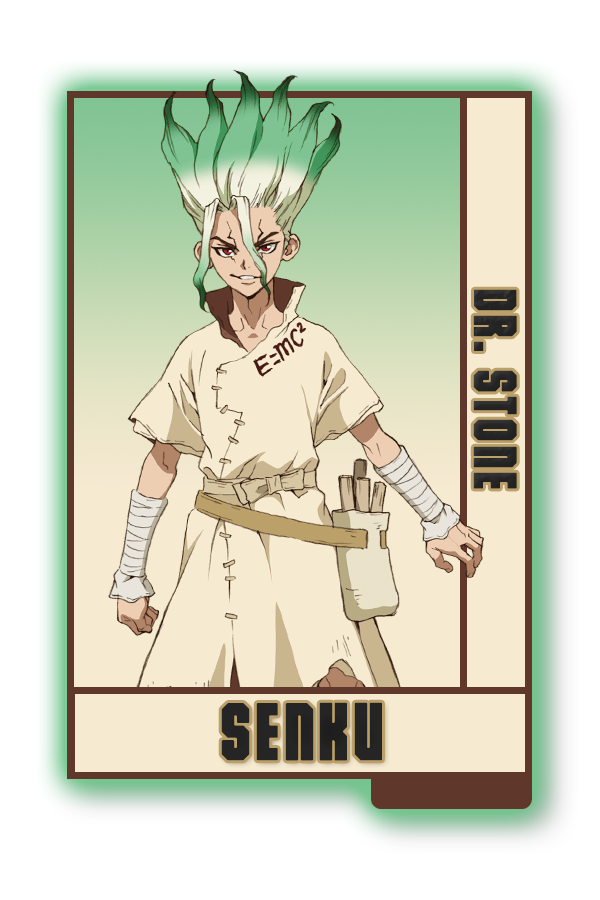
<style>
.page{position:relative;width:600px;height:900px;background:#f6ead1}
.page>*{position:absolute;margin:0}
.t1{font:56.2px "DalmationDemo";color:#252525}
.t2{font:75px "DalmationDemo";color:#252525}
</style>
<div class="page">
<p class="t1" style="left:473px;top:289px;width:44px;height:200px;rotate:90deg">Dr. Stone</p>
<p class="t2" style="left:221px;top:702px;width:161px;height:59px">Senku</p>
</div>
